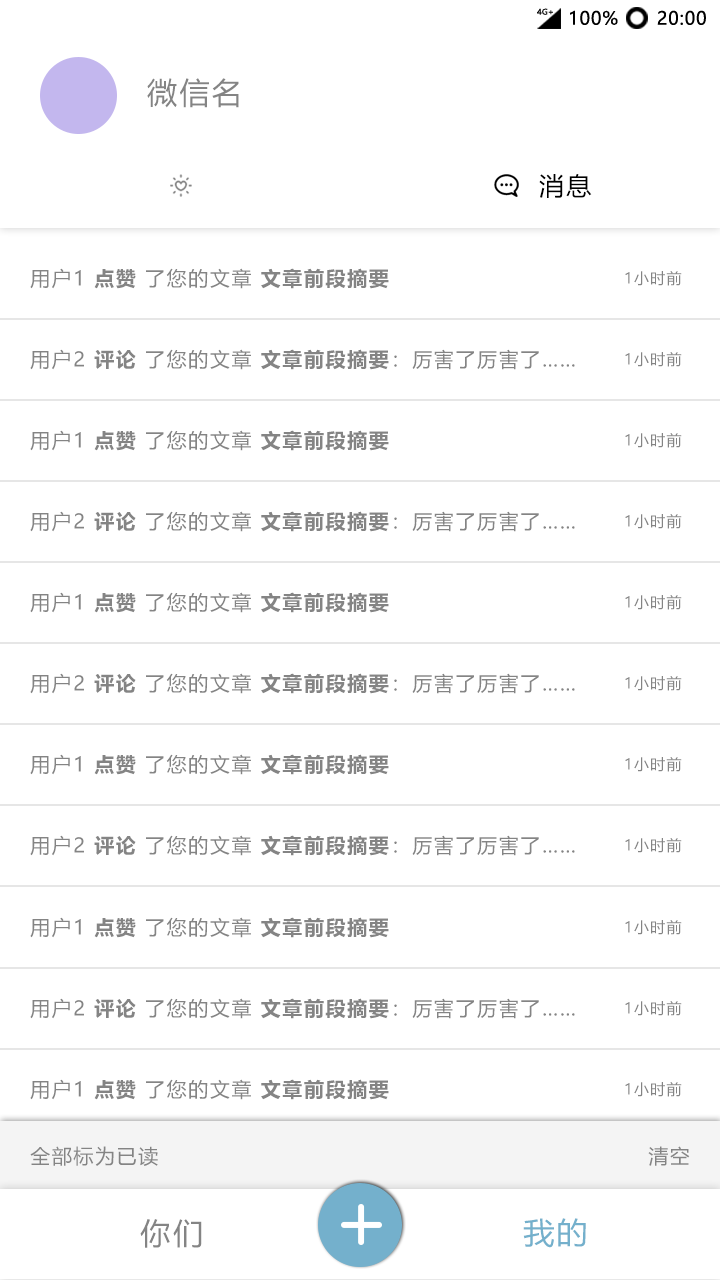
<style>
.page{position:relative;width:720px;height:1280px;background:#ffffff}
.page>*{position:absolute;margin:0}
.t1{font:7.8px "MicrosoftYaHei";letter-spacing:0.01em;color:#0f0f0f;scale:1.03 1}
.t2{font:18px "MicrosoftYaHei";letter-spacing:0.05em;color:#000000}
.t3{font:30px "MicrosoftYaHei";letter-spacing:0.08em;color:#848484}
.t4{font:25px "MicrosoftYaHei";letter-spacing:0.1em;color:#000000}
.t5{font:20px "MicrosoftYaHei-Bold";letter-spacing:0.08em;color:#848484}
.t6{font:20px "MicrosoftYaHei";letter-spacing:0.08em;color:#848484}
.t7{font:15px "MicrosoftYaHei";letter-spacing:0.08em;color:#848484}
.t8{font:30px "MicrosoftYaHei";letter-spacing:0.1em;color:#848484}
.t9{font:30px "MicrosoftYaHei";letter-spacing:0.08em;color:#74b0cc;scale:1.03 1}
</style>
<div class="page">
<p class="t1" style="left:537px;top:8px;width:16px;height:7px">4G+</p>
<p class="t2" style="left:570px;top:10px;width:48px;height:15px">100%</p>
<p class="t2" style="left:657px;top:10px;width:49px;height:15px">20:00</p>
<p class="t3" style="left:147px;top:78px;width:92px;height:30px">微信名</p>
<p class="t4" style="left:539px;top:174px;width:53px;height:24px">消息</p>
<p class="t5" style="left:30px;top:268px;width:359px;height:21px"><span class="t6">用户1 </span>点赞<span class="t6"> 了您的文章 </span>文章前段摘要</p>
<p class="t7" style="left:625px;top:271px;width:57px;height:15px">1小时前</p>
<p class="t6" style="left:30px;top:349px;width:545px;height:21px">用户2 <span class="t5">评论</span> 了您的文章 <span class="t5">文章前段摘要</span>：厉害了厉害了……</p>
<p class="t7" style="left:625px;top:352px;width:57px;height:15px">1小时前</p>
<p class="t5" style="left:30px;top:430px;width:359px;height:21px"><span class="t6">用户1 </span>点赞<span class="t6"> 了您的文章 </span>文章前段摘要</p>
<p class="t7" style="left:625px;top:433px;width:57px;height:15px">1小时前</p>
<p class="t6" style="left:30px;top:511px;width:545px;height:21px">用户2 <span class="t5">评论</span> 了您的文章 <span class="t5">文章前段摘要</span>：厉害了厉害了……</p>
<p class="t7" style="left:625px;top:514px;width:57px;height:15px">1小时前</p>
<p class="t5" style="left:30px;top:592px;width:359px;height:21px"><span class="t6">用户1 </span>点赞<span class="t6"> 了您的文章 </span>文章前段摘要</p>
<p class="t7" style="left:625px;top:595px;width:57px;height:15px">1小时前</p>
<p class="t6" style="left:30px;top:673px;width:545px;height:21px">用户2 <span class="t5">评论</span> 了您的文章 <span class="t5">文章前段摘要</span>：厉害了厉害了……</p>
<p class="t7" style="left:625px;top:676px;width:57px;height:15px">1小时前</p>
<p class="t5" style="left:30px;top:754px;width:359px;height:21px"><span class="t6">用户1 </span>点赞<span class="t6"> 了您的文章 </span>文章前段摘要</p>
<p class="t7" style="left:625px;top:757px;width:57px;height:15px">1小时前</p>
<p class="t6" style="left:30px;top:835px;width:545px;height:21px">用户2 <span class="t5">评论</span> 了您的文章 <span class="t5">文章前段摘要</span>：厉害了厉害了……</p>
<p class="t7" style="left:625px;top:838px;width:57px;height:15px">1小时前</p>
<p class="t5" style="left:30px;top:917px;width:359px;height:21px"><span class="t6">用户1 </span>点赞<span class="t6"> 了您的文章 </span>文章前段摘要</p>
<p class="t7" style="left:625px;top:920px;width:57px;height:15px">1小时前</p>
<p class="t6" style="left:30px;top:998px;width:545px;height:21px">用户2 <span class="t5">评论</span> 了您的文章 <span class="t5">文章前段摘要</span>：厉害了厉害了……</p>
<p class="t7" style="left:625px;top:1001px;width:57px;height:15px">1小时前</p>
<p class="t5" style="left:30px;top:1079px;width:359px;height:21px"><span class="t6">用户1 </span>点赞<span class="t6"> 了您的文章 </span>文章前段摘要</p>
<p class="t7" style="left:625px;top:1082px;width:57px;height:15px">1小时前</p>
<p class="t6" style="left:30px;top:1146px;width:128px;height:20px">全部标为已读</p>
<p class="t6" style="left:648px;top:1146px;width:42px;height:20px">清空</p>
<p class="t8" style="left:140px;top:1219px;width:62px;height:29px">你们</p>
<p class="t9" style="left:523px;top:1218px;width:63px;height:30px">我的</p>
</div>
